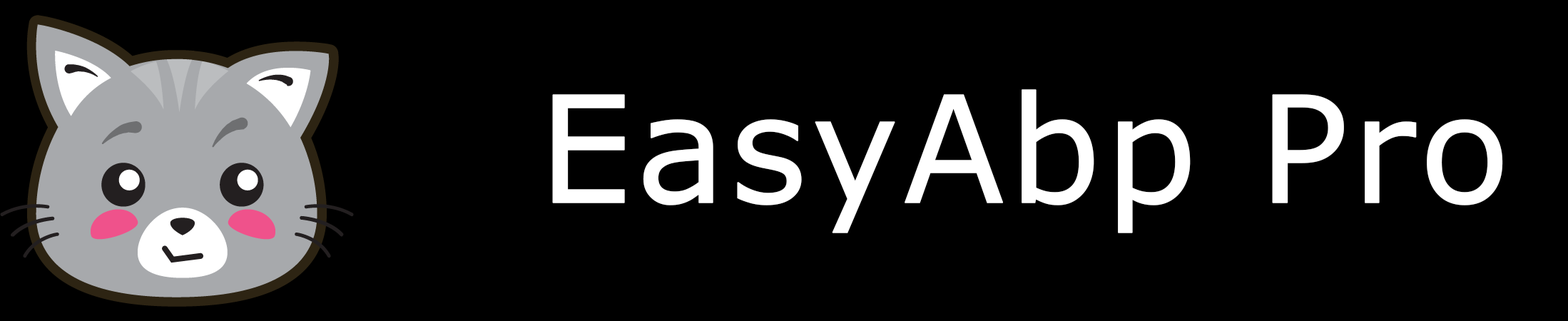
<style>
.page{position:relative;width:1568px;height:321px;background:#000000}
.page>*{position:absolute;margin:0}
.t1{font:148.6px "Verdana";color:#ffffff;font-weight:bold}
</style>
<div class="page">
<p class="t1" style="left:552px;top:89px;width:951px;height:144px">EasyAbp Pro</p>
</div>
